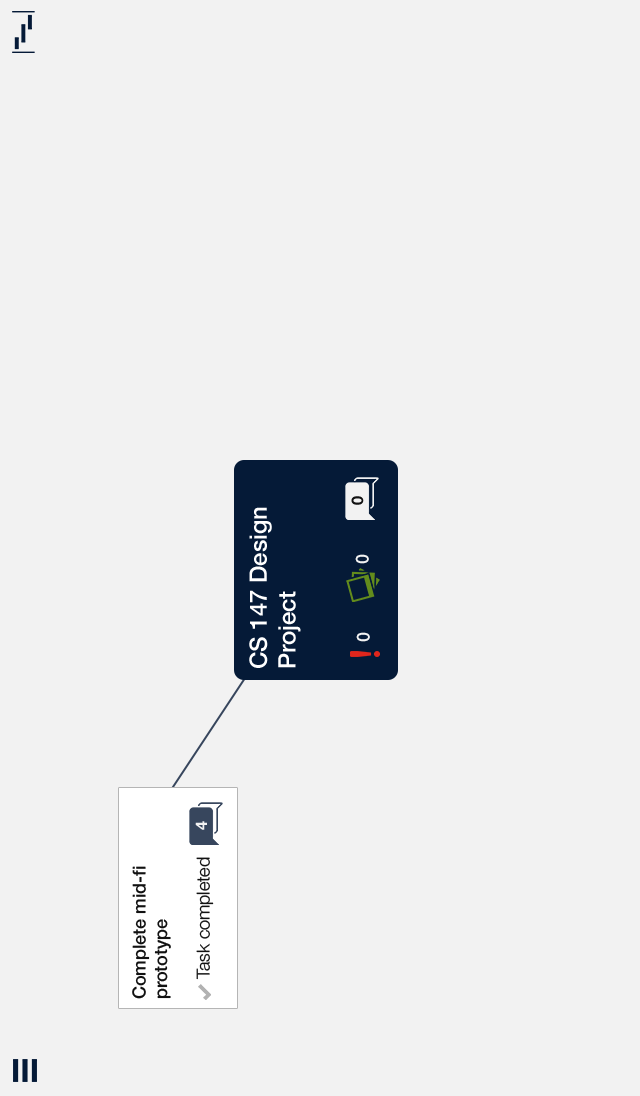
<style>
.page{position:relative;width:640px;height:1096px;background:#f2f2f2}
.page>*{position:absolute;margin:0}
.t1{font:16px "HelveticaNeue-Bold";color:#111111}
.t2{font:24px "HelveticaNeue-Medium";color:#ffffff}
.t3{font:18px "HelveticaNeue-Medium";color:#f2f2f2}
.t4{font:16px "HelveticaNeue-Bold";color:#f2f2f2}
.t5{font:18px "HelveticaNeue-Light";color:#111111}
.t6{font:18px "HelveticaNeue-Medium";color:#111111}
</style>
<div class="page">
<p class="t1" style="left:351px;top:496px;width:13px;height:9px;rotate:-90deg">0</p>
<p class="t2" style="left:249px;top:507px;width:52px;height:161px;rotate:-90deg">CS 147 Design Project</p>
<p class="t3" style="left:355px;top:554px;width:14px;height:10px;rotate:-90deg">0</p>
<p class="t3" style="left:356px;top:632px;width:14px;height:10px;rotate:-90deg">0</p>
<p class="t4" style="left:195px;top:821px;width:12px;height:9px;rotate:-90deg">4</p>
<p class="t5" style="left:196px;top:857px;width:18px;height:123px;rotate:-90deg">Task completed</p>
<p class="t6" style="left:132px;top:866px;width:39px;height:133px;rotate:-90deg">Complete mid-fi prototype</p>
</div>
